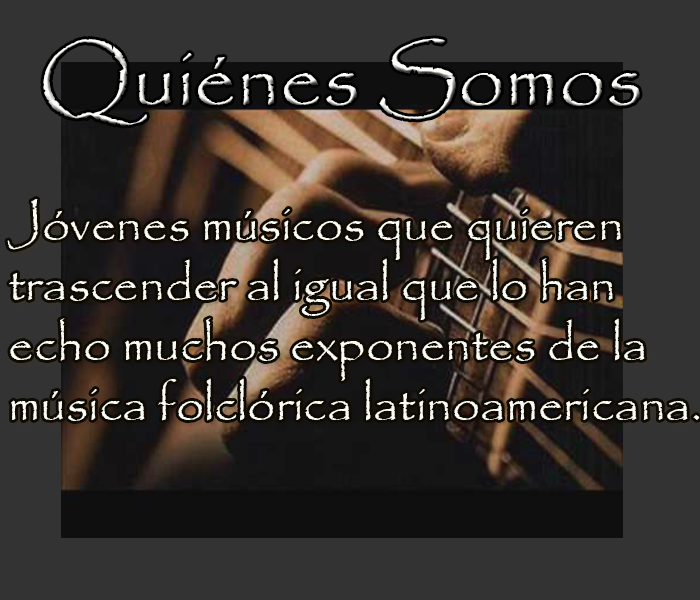
<style>
.page{position:relative;width:700px;height:600px;background:#333333}
.page>*{position:absolute;margin:0}
.t1{font:83.3px "Papyrus-Regular"}
.t2{font:50px "Papyrus-Regular";color:#fcfcf7}
</style>
<div class="page">
<p class="t1" style="left:43px;top:38px;width:597px;height:88px">Quiénes Somos</p>
<p class="t2" style="left:7px;top:199px;width:693px;height:222px">Jóvenes músicos que quieren <br>trascender al igual que lo han <br>echo muchos exponentes de la <br>música folclórica latinoamericana.</p>
</div>
